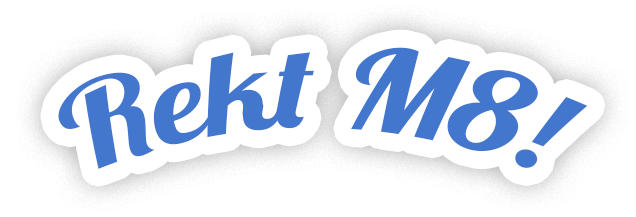
<style>
.page{position:relative;width:636px;height:217px;background:#ffffff}
.page>*{position:absolute;margin:0}
.t1{font:99.3px "Lobster1.4";color:#4377cd;scale:0.76 1}
</style>
<div class="page">
<p class="t1" style="left:58px;top:47px;width:530px;height:122px">Rekt M8!</p>
</div>
